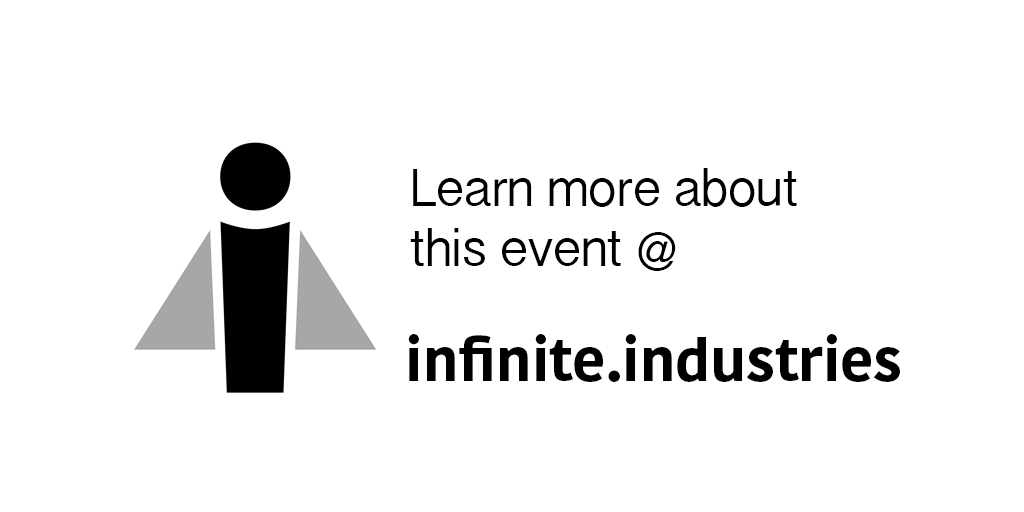
<style>
.page{position:relative;width:1024px;height:512px;background:#ffffff}
.page>*{position:absolute;margin:0}
.t1{font:50px "KannadaSangamMN";color:#000000}
.t2{font:58.3px "KohinoorDevanagari-Bold";color:#000000}
</style>
<div class="page">
<p class="t1" style="left:410px;top:168px;width:387px;height:103px">Learn more about <br>this event @</p>
<p class="t2" style="left:408px;top:334px;width:492px;height:48px">infinite.industries</p>
</div>
